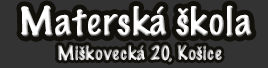
<style>
.page{position:relative;width:268px;height:68px;background:#333333}
.page>*{position:absolute;margin:0}
.t1{font:36px "MarkerFelt-Thin";letter-spacing:0.01em;color:#ffffff}
.t2{font:18px "MarkerFelt-Thin";letter-spacing:0.01em}
</style>
<div class="page">
<p class="t1" style="left:21px;top:5px;width:231px;height:32px">Materská škola</p>
<p class="t2" style="left:57px;top:44px;width:165px;height:18px">Miškovecká 20, Košice</p>
</div>
